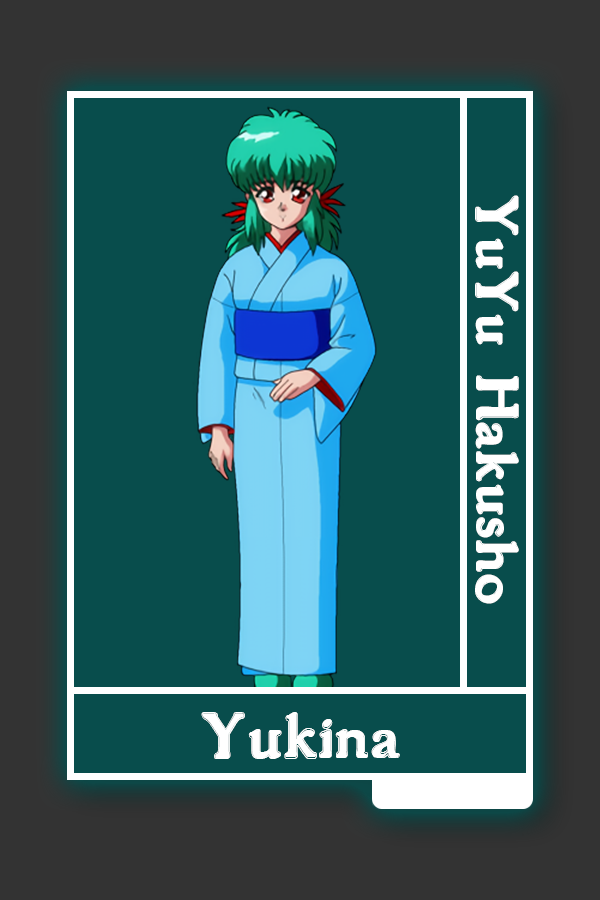
<style>
.page{position:relative;width:600px;height:900px;background:#084d4c}
.page>*{position:absolute;margin:0}
.t1{font:55.2px "GranthamOutline";color:#ffffff}
.t2{font:60.3px "GranthamOutline";color:#ffffff}
</style>
<div class="page">
<p class="t1" style="left:475px;top:195px;width:44px;height:409px;rotate:90deg">YuYu Hakusho</p>
<p class="t2" style="left:201px;top:712px;width:199px;height:47px">Yukina</p>
</div>
